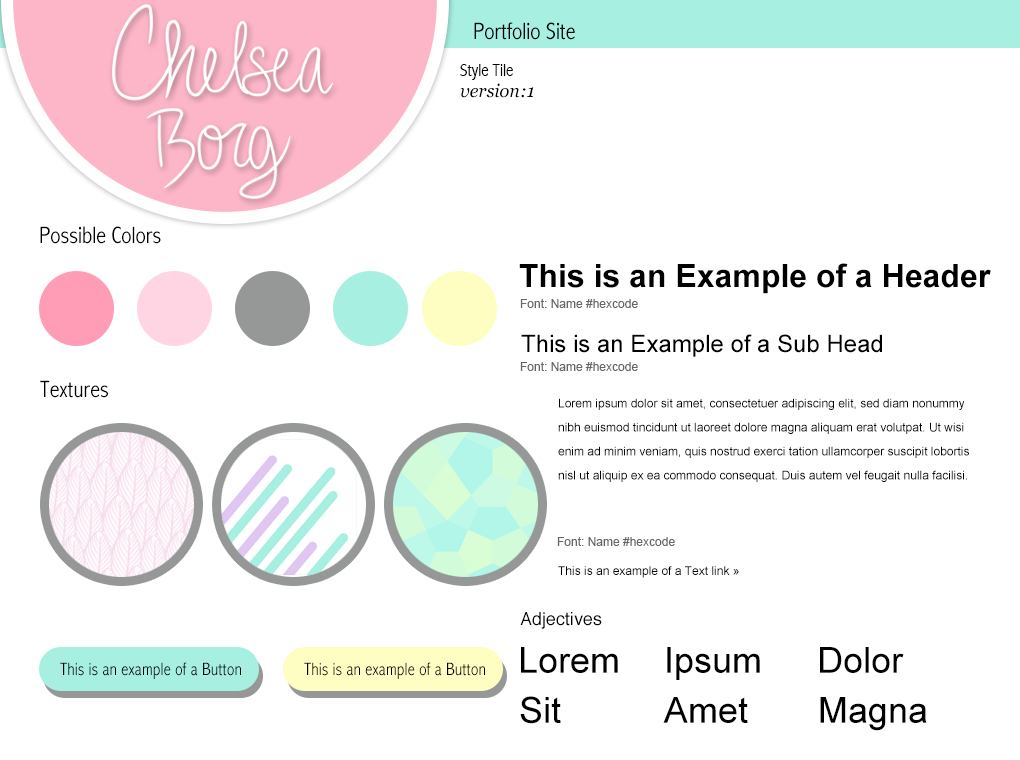
<style>
.page{position:relative;width:1020px;height:760px;background:#ffffff}
.page>*{position:absolute;margin:0}
.t1{font:24px "AbadiMT-CondensedLight";color:#000000}
.t2{font:18px "AbadiMT-CondensedLight";color:#000000}
.t3{font:18px "Georgia-Italic";color:#000000}
.t4{font:32px "Arial-BoldMT";color:#000000}
.t5{font:12px "ArialMT";color:#666666}
.t6{font:24px "ArialMT";color:#000000}
.t7{font:12px/24px "ArialMT";color:#000000}
.t8{font:12px "ArialMT";color:#000000}
.t9{font:18px "Helvetica";color:#000000}
.t10{font:36px "ArialMT";color:#000000}
</style>
<div class="page">
<p class="t1" style="left:474px;top:22px;width:101px;height:18px">Portfolio Site</p>
<p class="t2" style="left:460px;top:64px;width:53px;height:16px">Style Tile</p>
<p class="t3" style="left:460px;top:83px;width:74px;height:15px">version:1</p>
<p class="t1" style="left:40px;top:226px;width:121px;height:18px">Possible Colors</p>
<p class="t4" style="left:519px;top:263px;width:472px;height:31px">This is an Example of a Header</p>
<p class="t5" style="left:520px;top:299px;width:118px;height:9px">Font: Name #hexcode</p>
<p class="t6" style="left:521px;top:334px;width:361px;height:23px">This is an Example of a Sub Head</p>
<p class="t5" style="left:520px;top:362px;width:118px;height:9px">Font: Name #hexcode</p>
<p class="t1" style="left:40px;top:380px;width:68px;height:18px">Textures</p>
<p class="t7" style="left:558px;top:398px;width:411px;height:84px">Lorem ipsum dolor sit amet, consectetuer adipiscing elit, sed diam nonummy nibh euismod tincidunt ut laoreet dolore magna aliquam erat volutpat. Ut wisi enim ad minim veniam, quis nostrud exerci tation ullamcorper suscipit lobortis nisl ut aliquip ex ea commodo consequat. Duis autem vel feugait nulla facilisi.</p>
<p class="t5" style="left:557px;top:537px;width:118px;height:9px">Font: Name #hexcode</p>
<p class="t8" style="left:558px;top:566px;width:181px;height:12px">This is an example of a Text link »</p>
<p class="t9" style="left:520px;top:612px;width:82px;height:17px">Adjectives</p>
<p class="t10" style="left:521px;top:647px;width:97px;height:26px">Lorem</p>
<p class="t10" style="left:667px;top:647px;width:93px;height:33px">Ipsum</p>
<p class="t10" style="left:820px;top:647px;width:84px;height:26px">Dolor</p>
<p class="t2" style="left:60px;top:662px;width:181px;height:17px">This is an example of a Button</p>
<p class="t2" style="left:304px;top:662px;width:181px;height:17px">This is an example of a Button</p>
<p class="t10" style="left:520px;top:696px;width:41px;height:28px">Sit</p>
<p class="t10" style="left:663px;top:697px;width:85px;height:26px">Amet</p>
<p class="t10" style="left:820px;top:697px;width:107px;height:34px">Magna</p>
</div>
